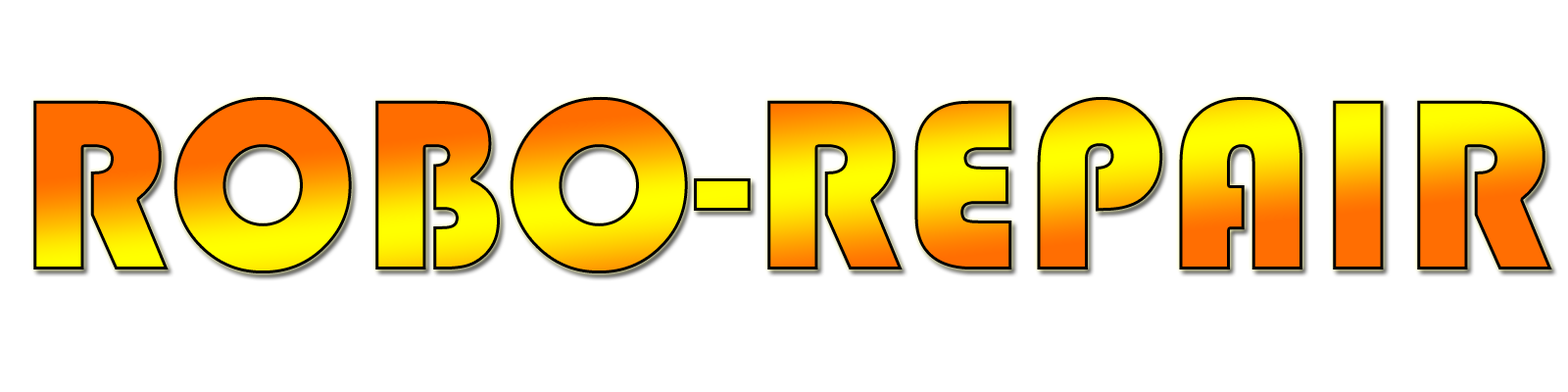
<style>
.page{position:relative;width:1568px;height:392px;background:#ffffff}
.page>*{position:absolute;margin:0}
.t1{font:253.2px "Bauhaus93"}
</style>
<div class="page">
<p class="t1" style="left:33px;top:96px;width:1519px;height:177px">ROBO-REPAIR</p>
</div>
